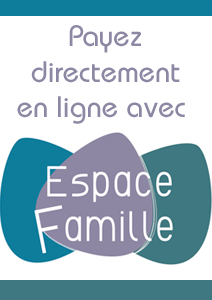
<style>
.page{position:relative;width:212px;height:300px;background:#ffffff}
.page>*{position:absolute;margin:0}
.t1{font:29.4px "DynameSSK";color:#8e87a3}
</style>
<div class="page">
<p class="t1" style="left:17px;top:25px;width:168px;height:99px;text-align:center">Payez<br>directement<br>en ligne avec</p>
</div>
